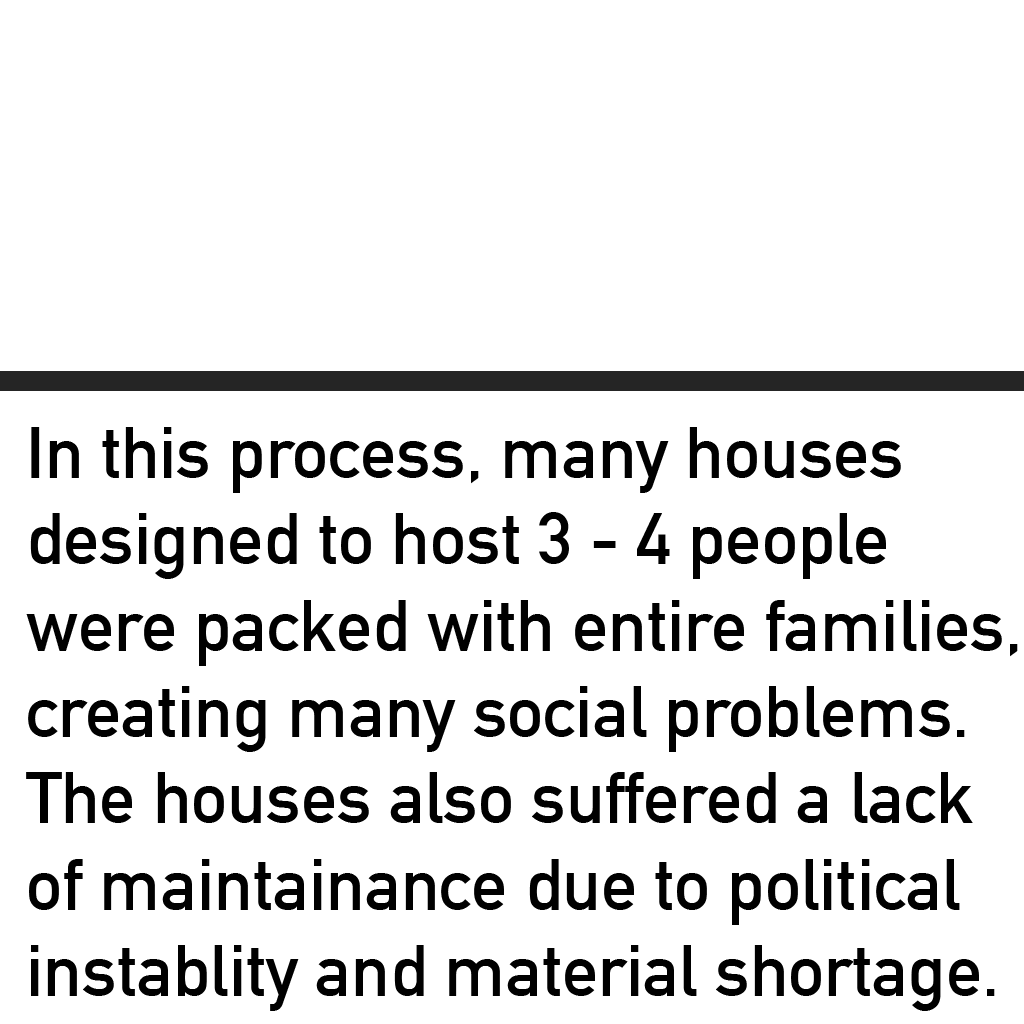
<style>
.page{position:relative;width:1024px;height:1024px;background:#ffffff}
.page>*{position:absolute;margin:0}
.t1{font:72px "DINAlternate-Bold";color:#000000}
</style>
<div class="page">
<p class="t1" style="left:26px;top:427px;width:992px;height:584px">In this process, many houses<br>designed to host 3 - 4 people<br>were packed with entire families, <br>creating many social problems. <br>The houses also suffered a lack<br>of maintainance due to political<br>instablity and material shortage.</p>
</div>
